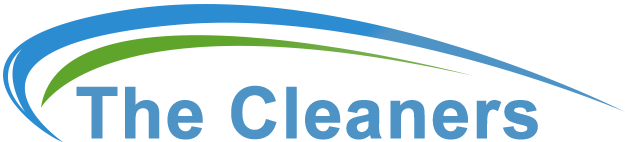
<style>
.page{position:relative;width:625px;height:142px;background:#ffffff}
.page>*{position:absolute;margin:0}
.t1{font:71.1px "Arial-BoldMT";color:#4d93c5;font-weight:bold}
</style>
<div class="page">
<p class="t1" style="left:76px;top:85px;width:462px;height:55px">The Cleaners</p>
</div>
